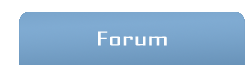
<style>
.page{position:relative;width:245px;height:65px;background:#ffffff}
.page>*{position:absolute;margin:0}
.t1{font:18px "AgencyFB-Reg";color:#ffffff;scale:2 1}
</style>
<div class="page">
<p class="t1" style="left:98px;top:31px;width:69px;height:15px">Forum</p>
</div>
